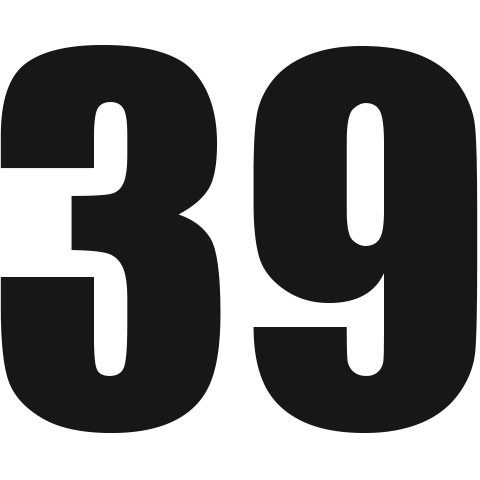
<style>
.page{position:relative;width:480px;height:480px;background:#171717}
.page>*{position:absolute;margin:0}
.t1{font:472.3px "Impact";color:#171717}
</style>
<div class="page">
<p class="t1" style="left:0px;top:45px;width:478px;height:388px">39</p>
</div>
